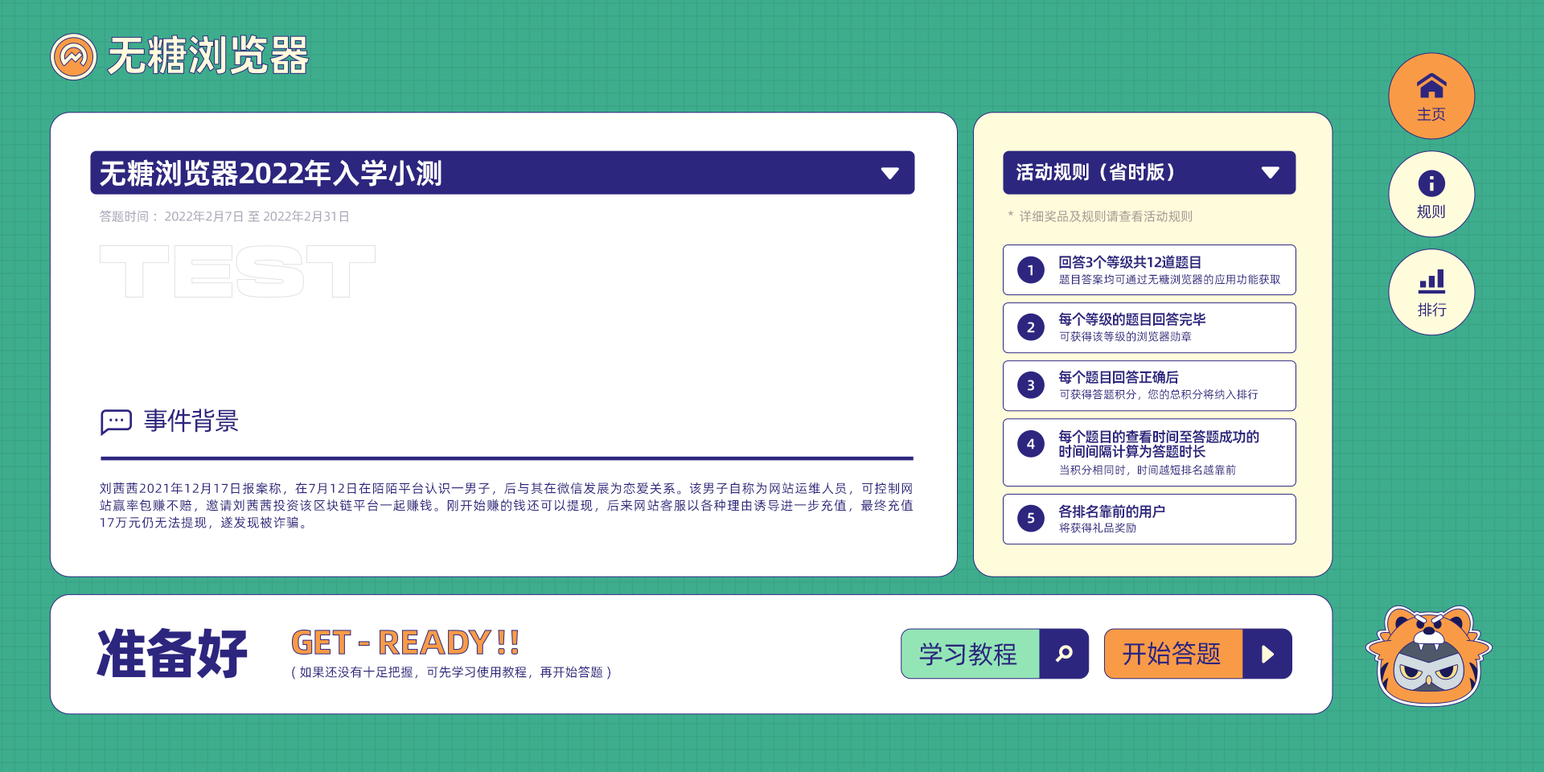
<style>
.page{position:relative;width:1544px;height:772px;background:#ffffff}
.page>*{position:absolute;margin:0}
.t1{font:15.5px "AlibabaPuHuiTi_2_55_Regular";letter-spacing:-0.04em;color:#2d267f}
.t2{font:29px "AlibabaPuHuiTi_2_85_Bold";letter-spacing:-0.02em;color:#ffffff}
.t3{font:19.3px "AlibabaPuHuiTi_2_85_Bold";letter-spacing:-0.02em;color:#ffffff}
.t4{font:12.9px "AlibabaPuHuiTi_2_55_Regular";letter-spacing:-0.02em;color:#a8a7b7}
.t5{font:12.9px "AlibabaPuHuiTi_2_55_Regular";letter-spacing:-0.02em;color:#a79a96}
.t6{font:14.5px "AlibabaPuHuiTi_2_85_Bold";letter-spacing:-0.06em;color:#2d267f}
.t7{font:11.3px "AlibabaPuHuiTi_2_55_Regular";color:#2d267f}
.t8{font:25.7px "AlibabaPuHuiTi_2_55_Regular";letter-spacing:-0.06em;color:#2d267f}
.t9{font:14.5px/14.6px "AlibabaPuHuiTi_2_85_Bold";letter-spacing:-0.06em;color:#2d267f}
.t10{font:12.9px/17.1px "AlibabaPuHuiTi_2_55_Regular";letter-spacing:0.04em;color:#2d267f}
.t11{font:25.7px "AlibabaPuHuiTi_2_55_Regular";letter-spacing:-0.02em;color:#2d267f}
.t12{font:12.9px "AlibabaPuHuiTi_2_55_Regular";color:#2d267f}
</style>
<div class="page">
<p class="t1" style="left:1417px;top:107px;width:28px;height:14px">主页</p>
<p class="t2" style="left:100px;top:159px;width:342px;height:28px">无糖浏览器2022年入学小测</p>
<p class="t3" style="left:1016px;top:162px;width:158px;height:19px">活动规则（省时版）</p>
<p class="t4" style="left:100px;top:210px;width:248px;height:13px">答题时间 ：2022年2月7日 至 2022年2月31日</p>
<p class="t5" style="left:1009px;top:210px;width:183px;height:13px">*  详细奖品及规则请查看活动规则</p>
<p class="t1" style="left:1417px;top:204px;width:28px;height:15px">规则</p>
<p class="t6" style="left:1059px;top:255px;width:142px;height:14px">回答3个等级共12道题目</p>
<p class="t7" style="left:1059px;top:273px;width:221px;height:12px">题目答案均可通过无糖浏览器的应用功能获取</p>
<p class="t1" style="left:1418px;top:302px;width:29px;height:15px">排行</p>
<p class="t6" style="left:1058px;top:312px;width:148px;height:15px">每个等级的题目回答完毕</p>
<p class="t7" style="left:1060px;top:331px;width:132px;height:11px">可获得该等级的浏览器勋章</p>
<p class="t6" style="left:1058px;top:370px;width:121px;height:14px">每个题目回答正确后</p>
<p class="t7" style="left:1060px;top:388px;width:199px;height:13px">可获得答题积分，您的总积分将纳入排行</p>
<p class="t8" style="left:144px;top:409px;width:94px;height:24px">事件背景</p>
<p class="t9" style="left:1058px;top:430px;width:202px;height:28px;text-align:justify">每个题目的查看时间至答题成功的<br>时间间隔计算为答题时长</p>
<p class="t7" style="left:1060px;top:464px;width:176px;height:12px">当积分相同时，时间越短排名越靠前</p>
<p class="t10" style="left:100px;top:482px;width:813px;height:47px;text-align:justify">刘茜茜2021年12月17日报案称，在7月12日在陌陌平台认识一男子，后与其在微信发展为恋爱关系。该男子自称为网站运维人员，可控制网站赢率包赚不赔，邀请刘茜茜投资该区块链平台一起赚钱。刚开始赚的钱还可以提现，后来网站客服以各种理由诱导进一步充值，最终充值17万元仍无法提现，遂发现被诈骗。</p>
<p class="t6" style="left:1058px;top:504px;width:107px;height:15px">各排名靠前的用户</p>
<p class="t7" style="left:1059px;top:522px;width:77px;height:11px">将获得礼品奖励</p>
<p class="t11" style="left:919px;top:642px;width:98px;height:25px">学习教程</p>
<p class="t11" style="left:1123px;top:641px;width:98px;height:25px">开始答题</p>
<p class="t12" style="left:292px;top:666px;width:318px;height:14px">( 如果还没有十足把握，可先学习使用教程，再开始答题 )</p>
</div>
